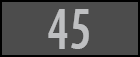
<style>
.page{position:relative;width:140px;height:57px;background:#4c4c4c}
.page>*{position:absolute;margin:0}
.t1{font:53.3px "FuturaCondensed";color:#bebfc1}
</style>
<div class="page">
<p class="t1" style="left:48px;top:9px;width:41px;height:40px">45</p>
</div>
